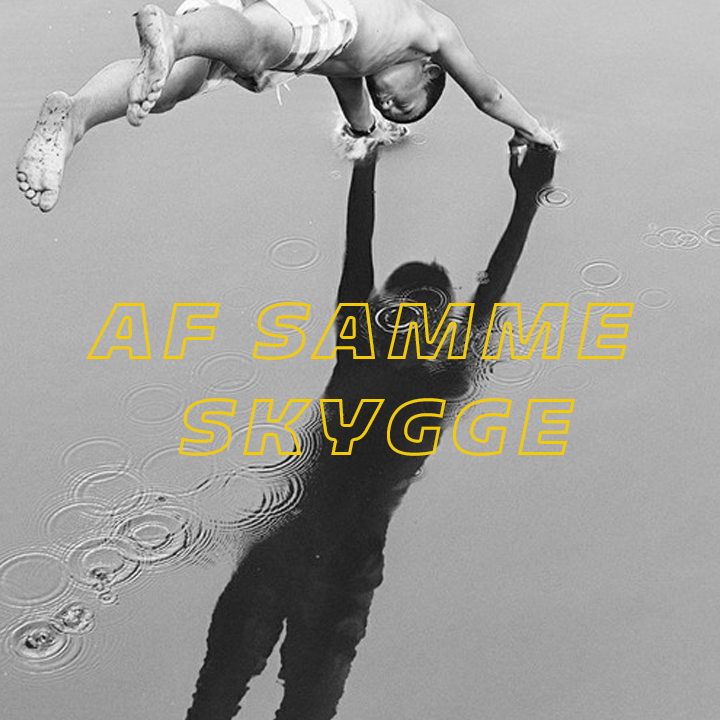
<style>
.page{position:relative;width:720px;height:720px}
.page>*{position:absolute;margin:0}
.t1{font:80px "Majoris-Italic";letter-spacing:0.1em;text-transform:uppercase}
</style>
<div class="page">
<p class="t1" style="left:86px;top:302px;width:548px;height:154px;text-align:center">af samme <br>skygge</p>
</div>
